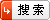
<style>
.page{position:relative;width:50px;height:20px}
.page>*{position:absolute;margin:0}
.t1{font:12px "SimSun";letter-spacing:0.2em;color:#000000}
</style>
<div class="page">
<p class="t1" style="left:18px;top:4px;width:26px;height:11px">搜索</p>
</div>
